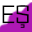
<style>
.page{position:relative;width:32px;height:32px;background:#ae18b4}
.page>*{position:absolute;margin:0}
.t1{font:25px "Ironstrike-Light";color:#000000}
</style>
<div class="page">
<p class="t1" style="left:2px;top:5px;width:27px;height:23px">EŞ</p>
</div>
